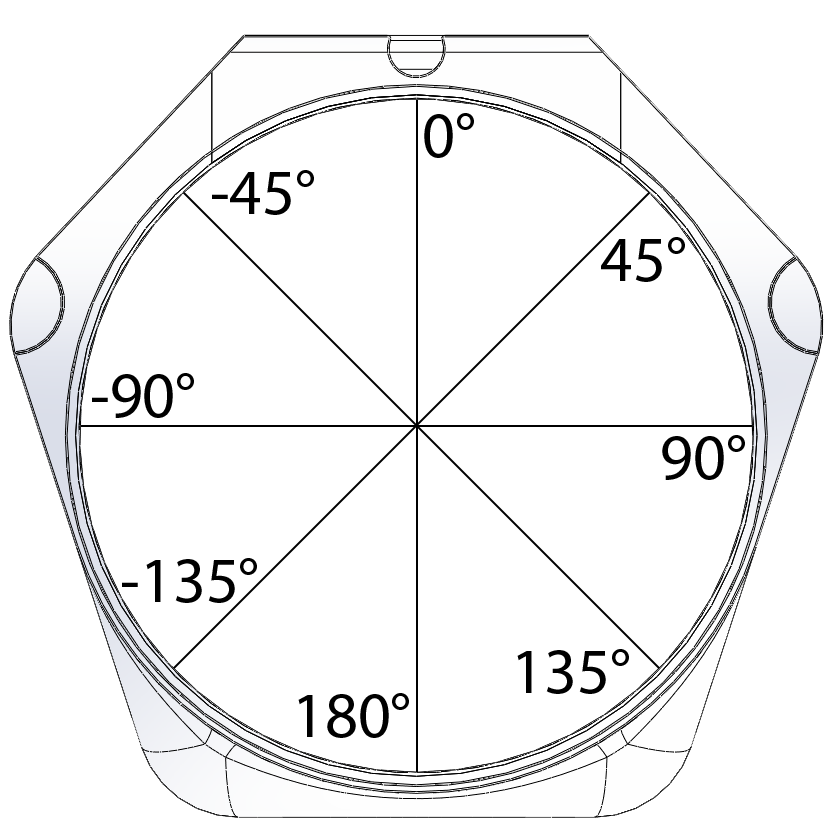
<style>
.page{position:relative;width:834px;height:835px;background:#ffffff}
.page>*{position:absolute;margin:0}
.t1{font:64px "MyriadPro-Regular";color:#000000}
</style>
<div class="page">
<p class="t1" style="left:424px;top:113px;width:50px;height:45px">0°</p>
<p class="t1" style="left:212px;top:170px;width:102px;height:45px">-45°</p>
<p class="t1" style="left:601px;top:237px;width:84px;height:45px">45°</p>
<p class="t1" style="left:92px;top:373px;width:102px;height:45px">-90°</p>
<p class="t1" style="left:662px;top:435px;width:83px;height:45px">90°</p>
<p class="t1" style="left:122px;top:558px;width:135px;height:45px">-135°</p>
<p class="t1" style="left:517px;top:649px;width:112px;height:45px">135°</p>
<p class="t1" style="left:298px;top:693px;width:111px;height:45px">180°</p>
</div>
